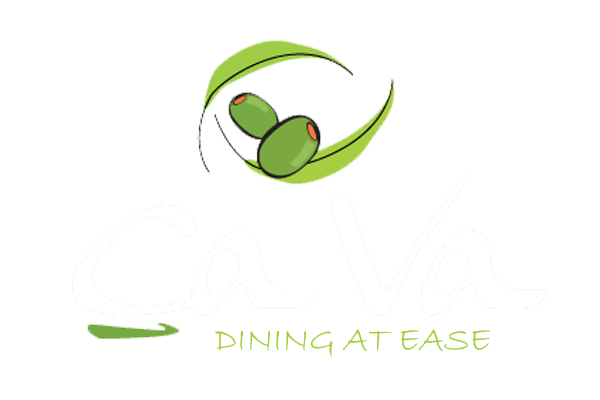
<style>
.page{position:relative;width:600px;height:400px;background:#ffffff}
.page>*{position:absolute;margin:0}
.t1{font:35.6px "BradleyHandITC";color:#a5ce43}
</style>
<div class="page">
<p class="t1" style="left:215px;top:329px;width:275px;height:28px">DINING AT EASE</p>
</div>
